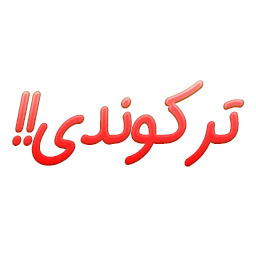
<style>
.page{position:relative;width:256px;height:256px;background:#ffffff}
.page>*{position:absolute;margin:0}
.t1{font:72.8px "IRANSansDNFaNum-Bold";letter-spacing:-0.06em;scale:0.84 1}
</style>
<div class="page">
<p class="t1" style="left:12px;top:80px;width:233px;height:87px">!! ترکوندی</p>
</div>
